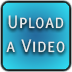
<style>
.page{position:relative;width:72px;height:72px}
.page>*{position:absolute;margin:0}
.t1{font:20px "Delicious-SmallCaps";color:#ebebeb}
</style>
<div class="page">
<p class="t1" style="left:6px;top:15px;width:59px;height:38px;text-align:center">Upload<br>a Video</p>
</div>
